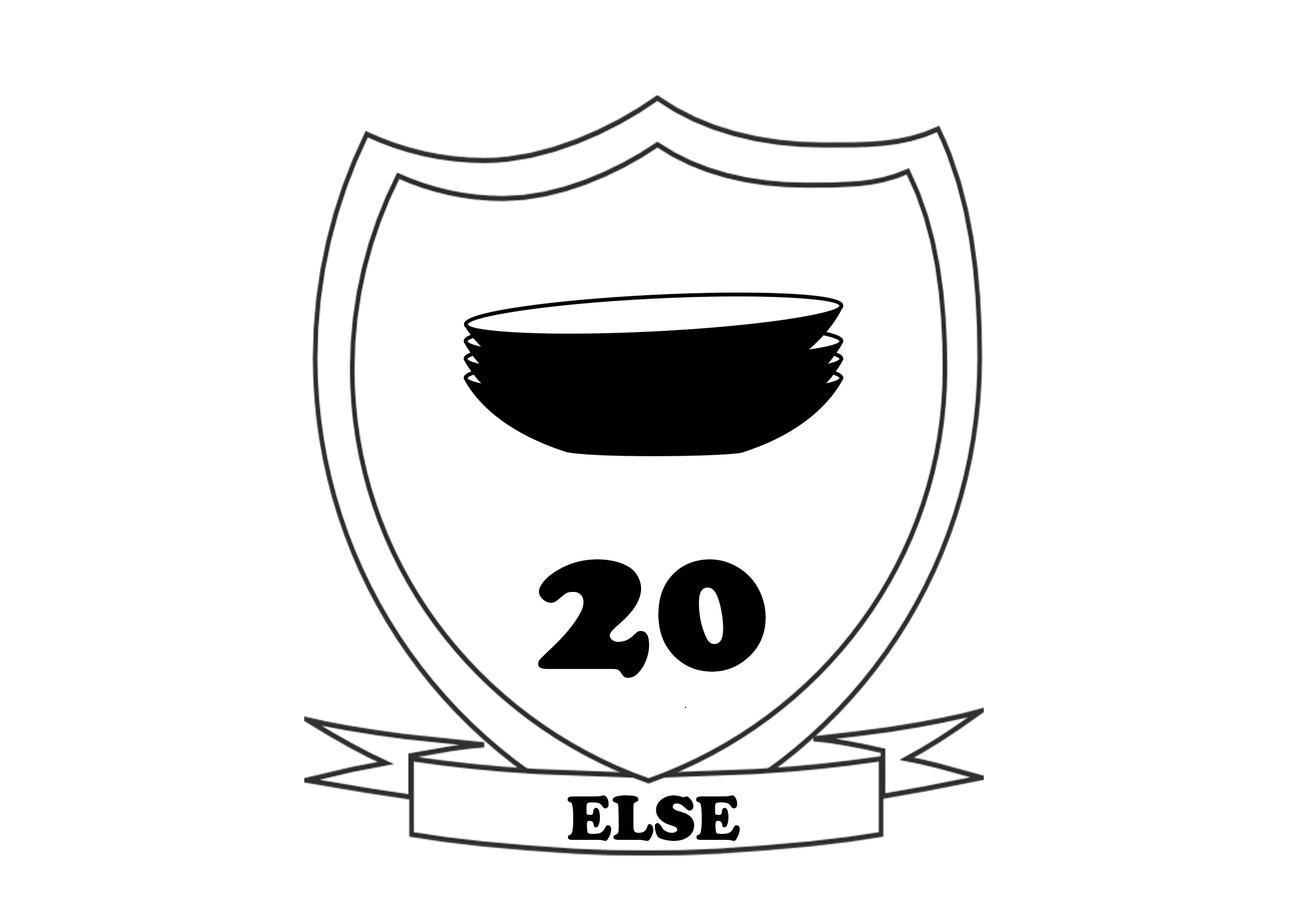
<style>
.page{position:relative;width:1307px;height:912px;background:#ffffff}
.page>*{position:absolute;margin:0}
.t1{font:195.3px "CooperBlack";color:#000000}
.t2{font:65.1px "CooperBlack";color:#000000}
</style>
<div class="page">
<p class="t1" style="left:538px;top:559px;width:228px;height:119px">20</p>
<p class="t2" style="left:567px;top:795px;width:174px;height:46px">ELSE</p>
</div>
